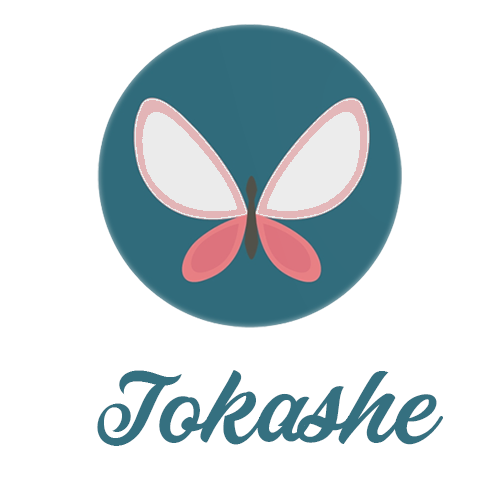
<style>
.page{position:relative;width:500px;height:500px;background:#ffffff}
.page>*{position:absolute;margin:0}
.t1{font:100px "PainterPERSONALUSEONLY";color:#357080}
</style>
<div class="page">
<p class="t1" style="left:97px;top:370px;width:346px;height:76px">Tokashe</p>
</div>
